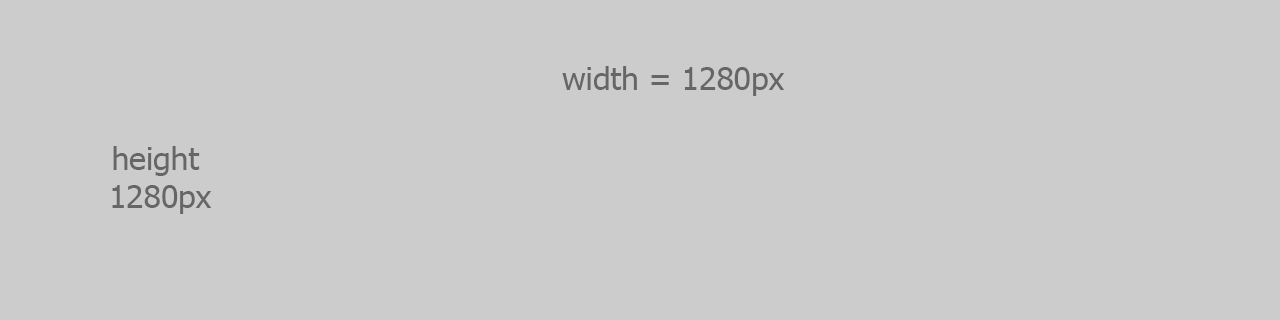
<style>
.page{position:relative;width:1280px;height:320px;background:#cccccc}
.page>*{position:absolute;margin:0}
.t1{font:31.8px "Tahoma";color:#666666}
</style>
<div class="page">
<p class="t1" style="left:562px;top:66px;width:223px;height:30px">width = 1280px</p>
<p class="t1" style="left:112px;top:146px;width:100px;height:68px;text-align:center">height<br> 1280px</p>
</div>
